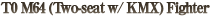
<style>
.page{position:relative;width:217px;height:16px;background:#ffffff}
.page>*{position:absolute;margin:0}
.t1{font:15px "RyuminPro-ExBold";letter-spacing:-0.08em;color:#4a3f32;font-weight:bold;scale:0.9 1}
</style>
<div class="page">
<p class="t1" style="left:0px;top:2px;width:210px;height:14px">T0 M64 (Two-seat w/ KMX) Fighter</p>
</div>
